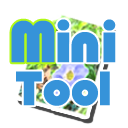
<style>
.page{position:relative;width:128px;height:128px;background:#ffffff}
.page>*{position:absolute;margin:0}
.t1{font:60px "Bauhaus93";letter-spacing:0.075em;color:#3693d9;font-weight:bold}
.t2{font:50px "Bauhaus93";letter-spacing:0.01em;color:#3693d9;font-weight:bold}
</style>
<div class="page">
<p class="t1" style="left:11px;top:20px;width:44px;height:43px">M</p>
<p class="t1" style="left:57px;top:19px;width:13px;height:44px">i</p>
<p class="t1" style="left:103px;top:19px;width:13px;height:44px">i</p>
<p class="t1" style="left:71px;top:32px;width:28px;height:31px">n</p>
<p class="t2" style="left:16px;top:71px;width:94px;height:35px">Tool</p>
</div>
